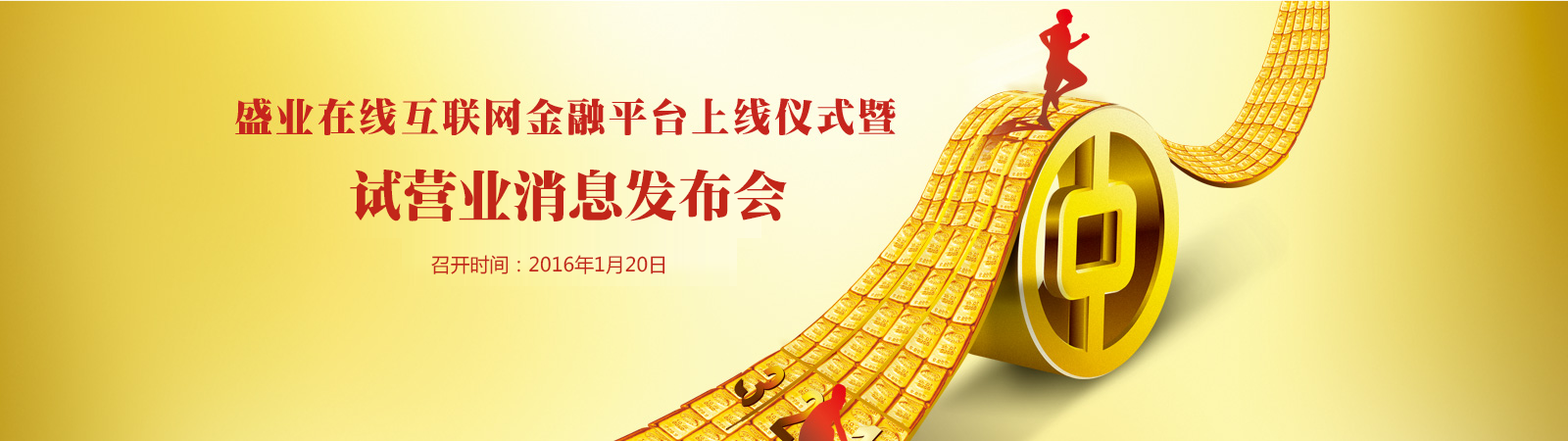
<style>
.page{position:relative;width:1568px;height:441px}
.page>*{position:absolute;margin:0}
.t1{font:53.9px "¾­µäÌØËÎ¼ò Regular";letter-spacing:0.01em;color:#c22619}
.t2{font:19.4px "MicrosoftYaHei";letter-spacing:0.01em;color:#c22619}
</style>
<div class="page">
<p class="t1" style="left:350px;top:169px;width:437px;height:52px">试营业消息发布会</p>
<p class="t2" style="left:431px;top:255px;width:234px;height:19px">召开时间：2016年1月20日</p>
</div>
